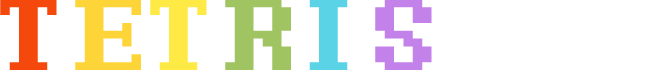
<style>
.page{position:relative;width:662px;height:70px;background:#ffffff}
.page>*{position:absolute;margin:0}
.t1{font:125.6px "Terminal";color:#f4480c;scale:0.96 1}
.t2{font:125.6px "Terminal";color:#fed538;scale:0.96 1}
.t3{font:125.6px "Terminal";color:#ffea45;scale:0.96 1}
.t4{font:125.6px "Terminal";color:#a0c462;scale:0.96 1}
.t5{font:125.6px "Terminal";color:#5ad3e7;scale:0.96 1}
.t6{font:125.6px "Terminal";color:#c282e9;scale:0.96 1}
</style>
<div class="page">
<p class="t1" style="left:0px;top:0px;width:432px;height:70px">T<span class="t2">E</span><span class="t3">T</span><span class="t4">R</span><span class="t5">I</span><span class="t6">S</span></p>
</div>
